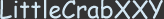
<style>
.page{position:relative;width:164px;height:19px;background:#333333}
.page>*{position:absolute;margin:0}
.t1{font:24px "ComicSansMS";color:#d3e7f3}
</style>
<div class="page">
<p class="t1" style="left:0px;top:0px;width:163px;height:19px">LittleCrabXXY</p>
</div>
